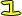
<style>
.page{position:relative;width:22px;height:16px;background:#ffffff}
.page>*{position:absolute;margin:0}
.t1{font:25px "ThundergodII";color:#fcff00}
</style>
<div class="page">
<p class="t1" style="left:1px;top:1px;width:20px;height:14px">1</p>
</div>
